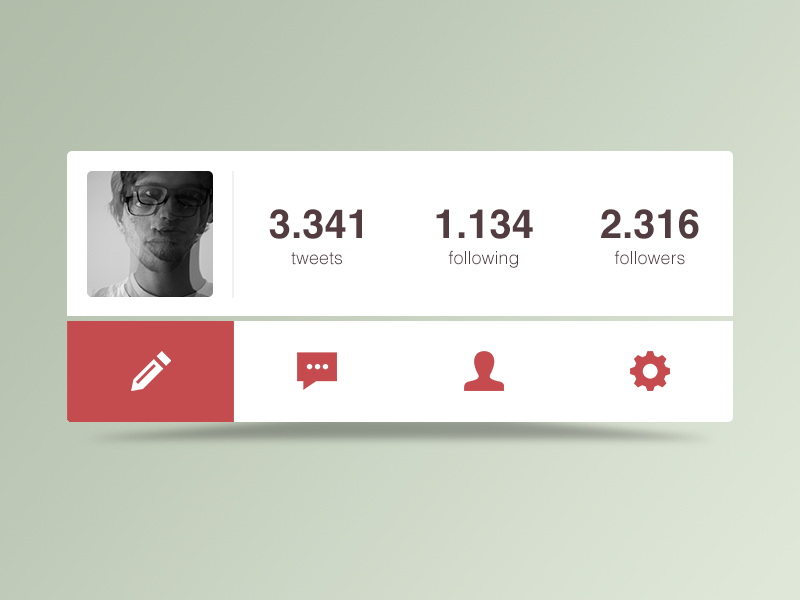
<style>
.page{position:relative;width:800px;height:600px;background:#ffffff}
.page>*{position:absolute;margin:0}
.t1{font:40.3px "Helvetica-Bold";color:#523c40}
.t2{font:18px "Helvetica-Light";color:#523c40}
</style>
<div class="page">
<p class="t1" style="left:269px;top:209px;width:93px;height:30px">3.341</p>
<p class="t1" style="left:436px;top:209px;width:97px;height:30px">1.134</p>
<p class="t1" style="left:601px;top:209px;width:98px;height:30px">2.316</p>
<p class="t2" style="left:291px;top:252px;width:51px;height:13px">tweets</p>
<p class="t2" style="left:448px;top:250px;width:70px;height:18px">following</p>
<p class="t2" style="left:614px;top:250px;width:71px;height:15px">followers</p>
</div>
